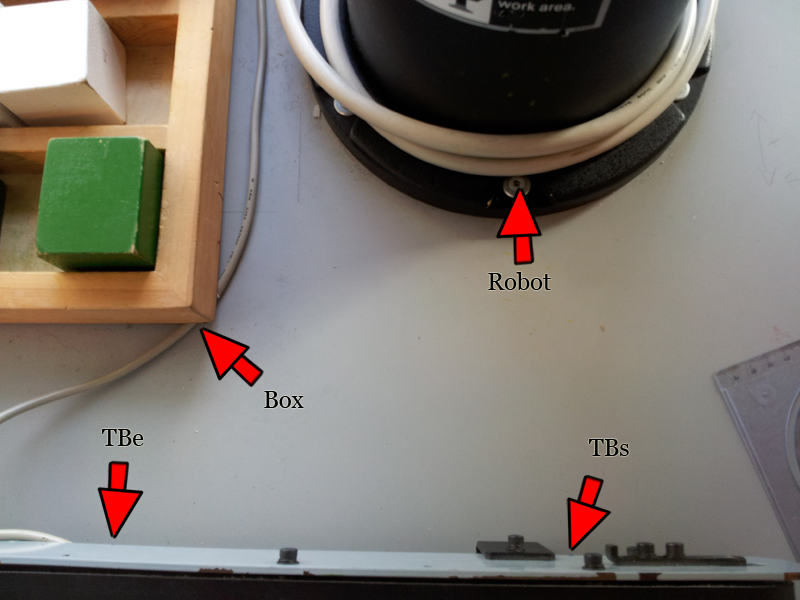
<style>
.page{position:relative;width:800px;height:600px}
.page>*{position:absolute;margin:0}
.t1{font:23.8px "Vani";color:#000000}
</style>
<div class="page">
<p class="t1" style="left:488px;top:272px;width:63px;height:18px">Robot</p>
<p class="t1" style="left:264px;top:391px;width:40px;height:17px">Box</p>
<p class="t1" style="left:102px;top:429px;width:42px;height:17px">TBe</p>
<p class="t1" style="left:589px;top:439px;width:40px;height:17px">TBs</p>
</div>
